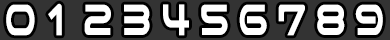
<style>
.page{position:relative;width:390px;height:40px;background:#333333}
.page>*{position:absolute;margin:0}
.t1{font:53px "NicoKaku";letter-spacing:0.196em;color:#ffffff;scale:0.75 1}
</style>
<div class="page">
<p class="t1" style="left:6px;top:3px;width:377px;height:33px">0123456789</p>
</div>
